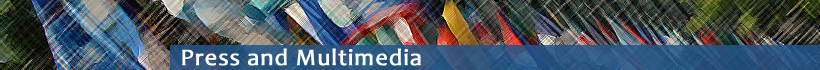
<style>
.page{position:relative;width:820px;height:70px}
.page>*{position:absolute;margin:0}
.t1{font:24px "Candara";letter-spacing:0.025em;color:#ffffff;font-weight:bold}
</style>
<div class="page">
<p class="t1" style="left:182px;top:48px;width:239px;height:18px">Press and Multimedia</p>
</div>
